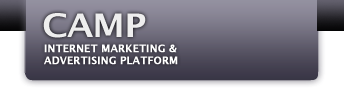
<style>
.page{position:relative;width:344px;height:90px}
.page>*{position:absolute;margin:0}
.t1{font:32.4px "LucidaGrande-Bold";letter-spacing:-0.025em;color:#eeeeee;text-transform:uppercase;scale:1.11 1}
.t2{font:10px "LucidaGrande-Bold";color:#ffffff;text-transform:uppercase;font-weight:bold}
</style>
<div class="page">
<p class="t1" style="left:43px;top:13px;width:103px;height:25px">CAMP</p>
<p class="t2" style="left:44px;top:44px;width:134px;height:21px">internet marketing &amp;<br>advertising platform</p>
</div>
